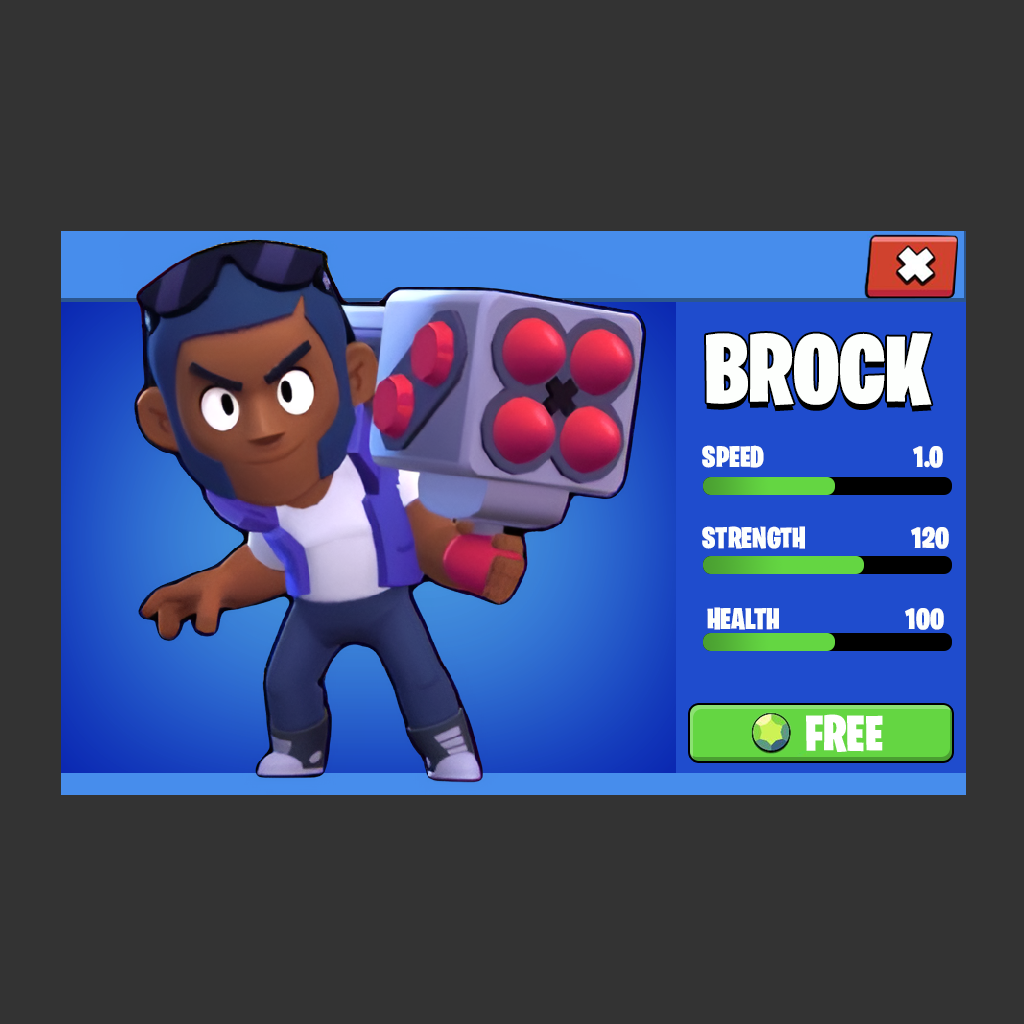
<style>
.page{position:relative;width:1024px;height:1024px;background:#333333}
.page>*{position:absolute;margin:0}
.t1{font:97.7px "BurbankBigCondensed-Black";color:#fdfffd}
.t2{font:30px "BurbankBigCondensed-Black";color:#fdfffd}
</style>
<div class="page">
<p class="t1" style="left:706px;top:333px;width:226px;height:73px">BROCK</p>
<p class="t2" style="left:702px;top:445px;width:62px;height:23px">SPEED</p>
<p class="t2" style="left:913px;top:446px;width:30px;height:22px">1.0</p>
<p class="t2" style="left:702px;top:526px;width:103px;height:23px">STRENGTH</p>
<p class="t2" style="left:911px;top:526px;width:38px;height:23px">120</p>
<p class="t2" style="left:707px;top:607px;width:72px;height:23px">HEALTH</p>
<p class="t2" style="left:905px;top:608px;width:39px;height:22px">100</p>
</div>
